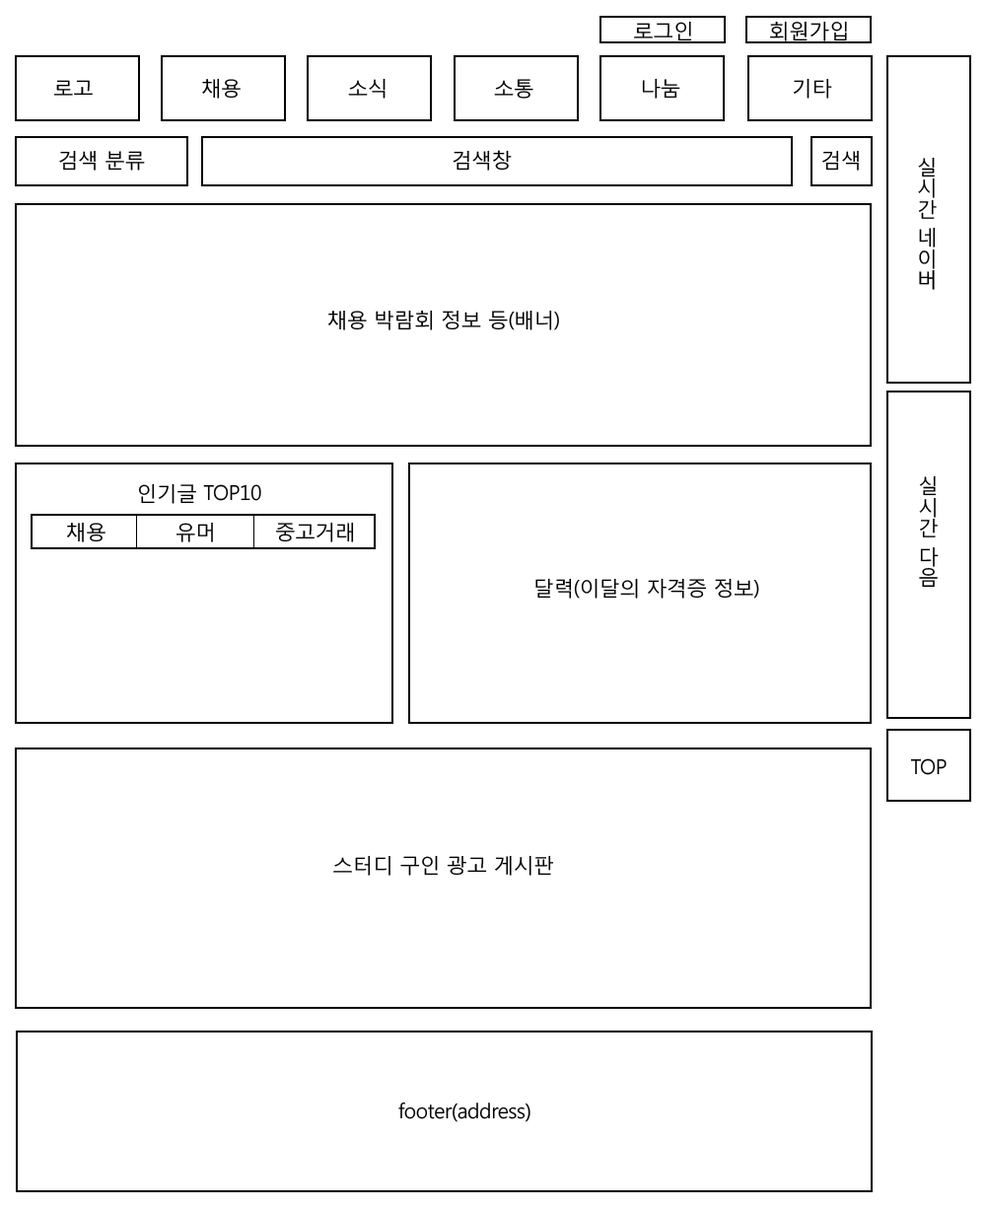
<style>
.page{position:relative;width:986px;height:1210px;background:#ffffff}
.page>*{position:absolute;margin:0}
.t1{font:20.5px "MalgunGothicRegular";letter-spacing:-0.025em;color:#000000}
</style>
<div class="page">
<p class="t1" style="left:634px;top:21px;width:58px;height:20px">로그인</p>
<p class="t1" style="left:770px;top:21px;width:77px;height:20px">회원가입</p>
<p class="t1" style="left:202px;top:78px;width:39px;height:21px">채용</p>
<p class="t1" style="left:348px;top:78px;width:37px;height:21px">소식</p>
<p class="t1" style="left:642px;top:78px;width:38px;height:21px">나눔</p>
<p class="t1" style="left:793px;top:78px;width:39px;height:21px">기타</p>
<p class="t1" style="left:54px;top:80px;width:39px;height:16px">로고</p>
<p class="t1" style="left:494px;top:79px;width:39px;height:20px">소통</p>
<p class="t1" style="left:59px;top:150px;width:86px;height:21px">검색 분류</p>
<p class="t1" style="left:452px;top:150px;width:60px;height:21px">검색창</p>
<p class="t1" style="left:822px;top:150px;width:37px;height:21px">검색</p>
<p class="t1" style="left:918px;top:157px;width:19px;height:133px">실시간 네이버</p>
<p class="t1" style="left:328px;top:310px;width:231px;height:20px">채용 박람회 정보 등(배너)</p>
<p class="t1" style="left:138px;top:483px;width:123px;height:21px">인기글 TOP10</p>
<p class="t1" style="left:919px;top:475px;width:19px;height:113px">실시간 다음</p>
<p class="t1" style="left:276px;top:521px;width:78px;height:21px">중고거래</p>
<p class="t1" style="left:67px;top:522px;width:38px;height:20px">채용</p>
<p class="t1" style="left:176px;top:522px;width:37px;height:20px">유머</p>
<p class="t1" style="left:535px;top:578px;width:224px;height:20px">달력(이달의 자격증 정보)</p>
<p class="t1" style="left:910px;top:758px;width:36px;height:17px">TOP</p>
<p class="t1" style="left:333px;top:855px;width:220px;height:20px">스터디 구인 광고 게시판</p>
<p class="t1" style="left:398px;top:1101px;width:132px;height:21px">footer(address)</p>
</div>
